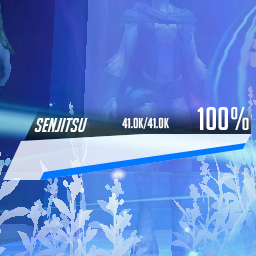
<style>
.page{position:relative;width:256px;height:256px}
.page>*{position:absolute;margin:0}
.t1{font:32px "BigNoodleTitling";color:#ffffff}
.t2{font:18px "BigNoodleTitling";color:#ffffff}
.t3{font:20px "BigNoodleTooOblique";color:#ffffff}
.t4{font:14px "BigNoodleTitling";color:#ffffff}
</style>
<div class="page">
<p class="t1" style="left:197px;top:107px;width:52px;height:23px"><span class="t2"> </span>100%</p>
<p class="t3" style="left:34px;top:118px;width:54px;height:14px">SENJITSU</p>
<p class="t4" style="left:122px;top:117px;width:47px;height:12px">41.0k/41.0k</p>
</div>
